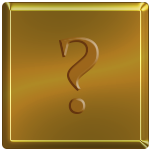
<style>
.page{position:relative;width:150px;height:150px}
.page>*{position:absolute;margin:0}
.t1{font:110px "Constantia-Bold"}
</style>
<div class="page">
<p class="t1" style="left:58px;top:37px;width:41px;height:77px">?</p>
</div>
